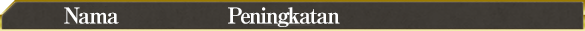
<style>
.page{position:relative;width:585px;height:31px}
.page>*{position:absolute;margin:0}
.t1{font:22px "RyuminPro-ExBold";letter-spacing:-0.08em;color:#ffffff}
</style>
<div class="page">
<p class="t1" style="left:64px;top:7px;width:55px;height:17px">Nama</p>
<p class="t1" style="left:228px;top:7px;width:112px;height:20px">Peningkatan</p>
</div>
